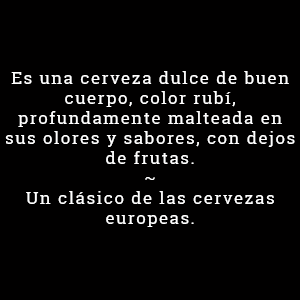
<style>
.page{position:relative;width:300px;height:300px;background:#010000}
.page>*{position:absolute;margin:0}
.t1{font:16.7px "RobotoSlab-Regular";letter-spacing:0.1em;color:#ffffff}
</style>
<div class="page">
<p class="t1" style="left:5px;top:71px;width:290px;height:156px;text-align:center">Es una cerveza dulce de buen cuerpo, color rubí, profundamente malteada en sus olores y sabores, con dejos de frutas. <br>~<br>Un clásico de las cervezas europeas.</p>
</div>
